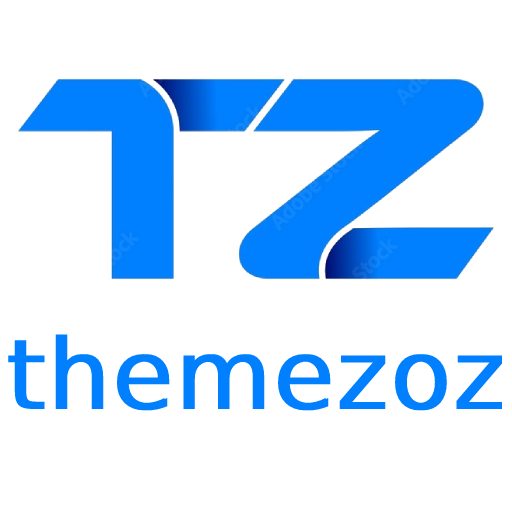
<style>
.page{position:relative;width:512px;height:512px;background:#ffffff}
.page>*{position:absolute;margin:0}
.t1{font:98px "DejaVuSans";color:#0080ff;font-weight:bold}
</style>
<div class="page">
<p class="t1" style="left:8px;top:334px;width:495px;height:77px">themezoz</p>
</div>
